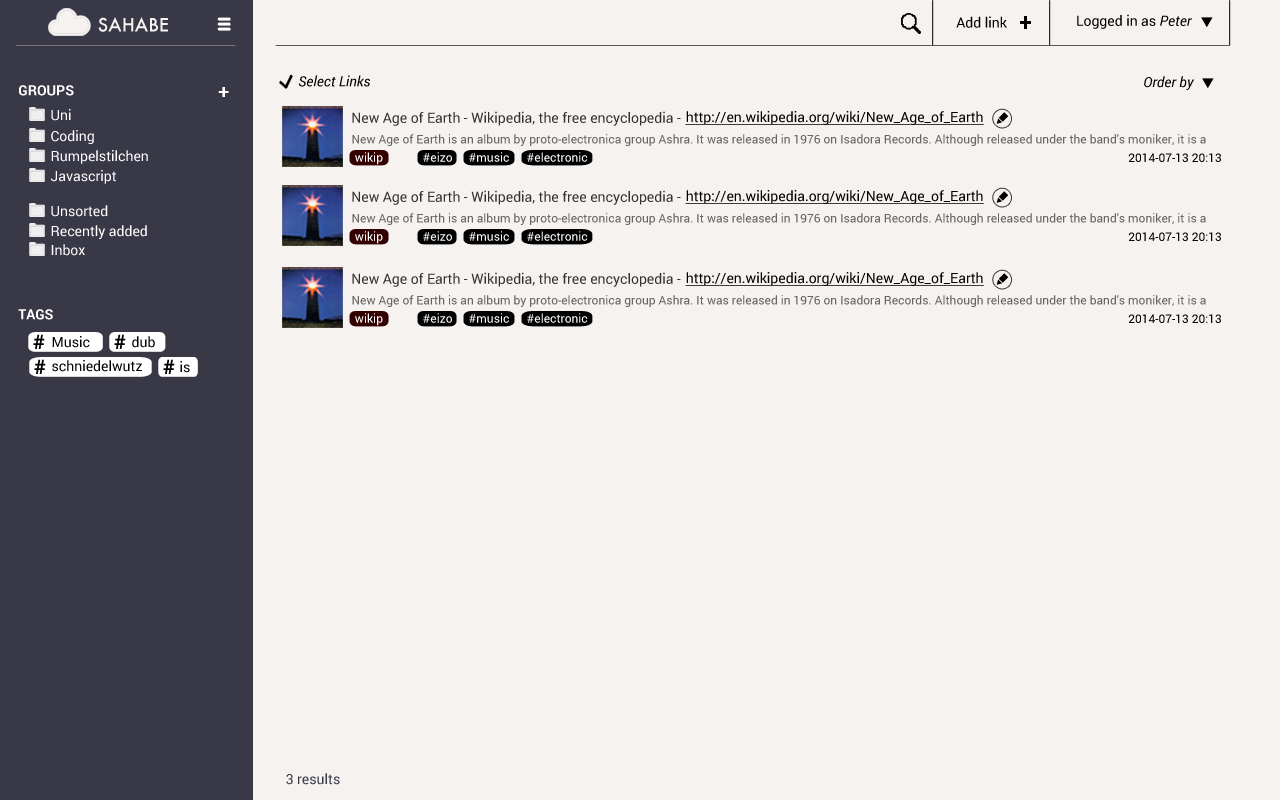
<style>
.page{position:relative;width:1280px;height:800px;background:#f5f2f0}
.page>*{position:absolute;margin:0}
.t1{font:18px "Futura-Medium";color:#f5f2f0}
.t2{font:14px "Roboto-Regular";color:#000000}
.t3{font:24px "Roboto-Bold";color:#000000}
.t4{font:14px "Roboto-Italic";color:#000000}
.t5{font:14px "Roboto-Bold";color:#ffffff}
.t6{font:20px "Roboto-Bold";color:#ffffff}
.t7{font:14px "Roboto-Regular";color:#ffffff}
.t8{font:14px "Roboto-Regular";color:#333333}
.t9{font:14px "Roboto-Regular";color:#000000;text-decoration:underline}
.t10{font:12px "Roboto-Regular";color:#666666}
.t11{font:12px "Roboto-Regular";color:#ffffff}
.t12{font:12px "Roboto-Regular";color:#000000}
.t13{font:14px "Roboto-Regular";color:#fffefe}
.t14{font:20px "Roboto-Bold";color:#000000}
.t15{font:14px "Roboto-Regular";color:#383846}
</style>
<div class="page">
<p class="t1" style="left:98px;top:17px;width:70px;height:15px">SAHABE</p>
<p class="t2" style="left:956px;top:16px;width:51px;height:12px">Add link</p>
<p class="t3" style="left:1020px;top:16px;width:11px;height:13px">+</p>
<p class="t2" style="left:1077px;top:14px;width:116px;height:15px">Logged in as <span class="t4">Peter</span></p>
<p class="t4" style="left:299px;top:75px;width:71px;height:12px">Select Links</p>
<p class="t4" style="left:1144px;top:76px;width:50px;height:14px">Order by</p>
<p class="t5" style="left:19px;top:85px;width:55px;height:11px">GROUPS</p>
<p class="t6" style="left:218px;top:87px;width:11px;height:10px">+</p>
<p class="t7" style="left:51px;top:109px;width:20px;height:12px">Uni</p>
<p class="t8" style="left:352px;top:111px;width:329px;height:15px">New Age of Earth - Wikipedia, the free encyclopedia -</p>
<p class="t9" style="left:685px;top:111px;width:299px;height:14px">http://en.wikipedia.org/wiki/New_Age_of_Earth</p>
<p class="t7" style="left:51px;top:130px;width:43px;height:14px">Coding</p>
<p class="t10" style="left:352px;top:134px;width:854px;height:12px">New Age of Earth is an album by proto-electronica group Ashra. It was released in 1976 on Isadora Records. Although released under the band's moniker, it is a solo album by Ashra member Manuel Göttsching.</p>
<p class="t7" style="left:51px;top:150px;width:97px;height:14px">Rumpelstilchen</p>
<p class="t11" style="left:355px;top:152px;width:28px;height:13px">wikip</p>
<p class="t11" style="left:423px;top:152px;width:29px;height:10px">#eizo</p>
<p class="t11" style="left:469px;top:152px;width:40px;height:10px">#music</p>
<p class="t11" style="left:527px;top:152px;width:61px;height:10px">#electronic</p>
<p class="t12" style="left:1128px;top:153px;width:93px;height:9px">2014-07-13 20:13</p>
<p class="t13" style="left:51px;top:170px;width:65px;height:14px">Javascript</p>
<p class="t8" style="left:352px;top:190px;width:329px;height:15px">New Age of Earth - Wikipedia, the free encyclopedia -</p>
<p class="t9" style="left:685px;top:190px;width:299px;height:14px">http://en.wikipedia.org/wiki/New_Age_of_Earth</p>
<p class="t7" style="left:51px;top:205px;width:57px;height:12px">Unsorted</p>
<p class="t10" style="left:352px;top:213px;width:854px;height:12px">New Age of Earth is an album by proto-electronica group Ashra. It was released in 1976 on Isadora Records. Although released under the band's moniker, it is a solo album by Ashra member Manuel Göttsching.</p>
<p class="t7" style="left:51px;top:225px;width:96px;height:14px">Recently added</p>
<p class="t11" style="left:355px;top:231px;width:28px;height:13px">wikip</p>
<p class="t11" style="left:423px;top:231px;width:29px;height:10px">#eizo</p>
<p class="t11" style="left:469px;top:231px;width:40px;height:10px">#music</p>
<p class="t11" style="left:527px;top:231px;width:61px;height:10px">#electronic</p>
<p class="t12" style="left:1128px;top:232px;width:93px;height:9px">2014-07-13 20:13</p>
<p class="t7" style="left:51px;top:244px;width:34px;height:12px">Inbox</p>
<p class="t8" style="left:352px;top:272px;width:329px;height:15px">New Age of Earth - Wikipedia, the free encyclopedia -</p>
<p class="t9" style="left:685px;top:272px;width:299px;height:14px">http://en.wikipedia.org/wiki/New_Age_of_Earth</p>
<p class="t10" style="left:352px;top:295px;width:854px;height:12px">New Age of Earth is an album by proto-electronica group Ashra. It was released in 1976 on Isadora Records. Although released under the band's moniker, it is a solo album by Ashra member Manuel Göttsching.</p>
<p class="t5" style="left:18px;top:309px;width:35px;height:11px">TAGS</p>
<p class="t11" style="left:355px;top:313px;width:28px;height:13px">wikip</p>
<p class="t11" style="left:423px;top:313px;width:29px;height:10px">#eizo</p>
<p class="t11" style="left:469px;top:313px;width:40px;height:10px">#music</p>
<p class="t11" style="left:527px;top:313px;width:61px;height:10px">#electronic</p>
<p class="t12" style="left:1128px;top:314px;width:93px;height:9px">2014-07-13 20:13</p>
<p class="t14" style="left:33px;top:334px;width:12px;height:15px">#</p>
<p class="t2" style="left:52px;top:336px;width:38px;height:12px">Music</p>
<p class="t14" style="left:114px;top:334px;width:12px;height:15px">#</p>
<p class="t2" style="left:132px;top:336px;width:23px;height:12px">dub</p>
<p class="t14" style="left:34px;top:359px;width:12px;height:15px">#</p>
<p class="t2" style="left:52px;top:360px;width:90px;height:12px">schniedelwutz</p>
<p class="t14" style="left:163px;top:359px;width:12px;height:15px">#</p>
<p class="t2" style="left:180px;top:361px;width:10px;height:12px">is</p>
<p class="t15" style="left:286px;top:773px;width:54px;height:12px">3 results</p>
</div>
